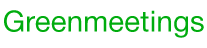
<style>
.page{position:relative;width:207px;height:48px;background:#ffffff}
.page>*{position:absolute;margin:0}
.t1{font:29.2px "HelveticaNeueCyr-Roman";letter-spacing:0.01em;color:#00ac0e}
</style>
<div class="page">
<p class="t1" style="left:4px;top:10px;width:200px;height:28px">Greenmeetings</p>
</div>
